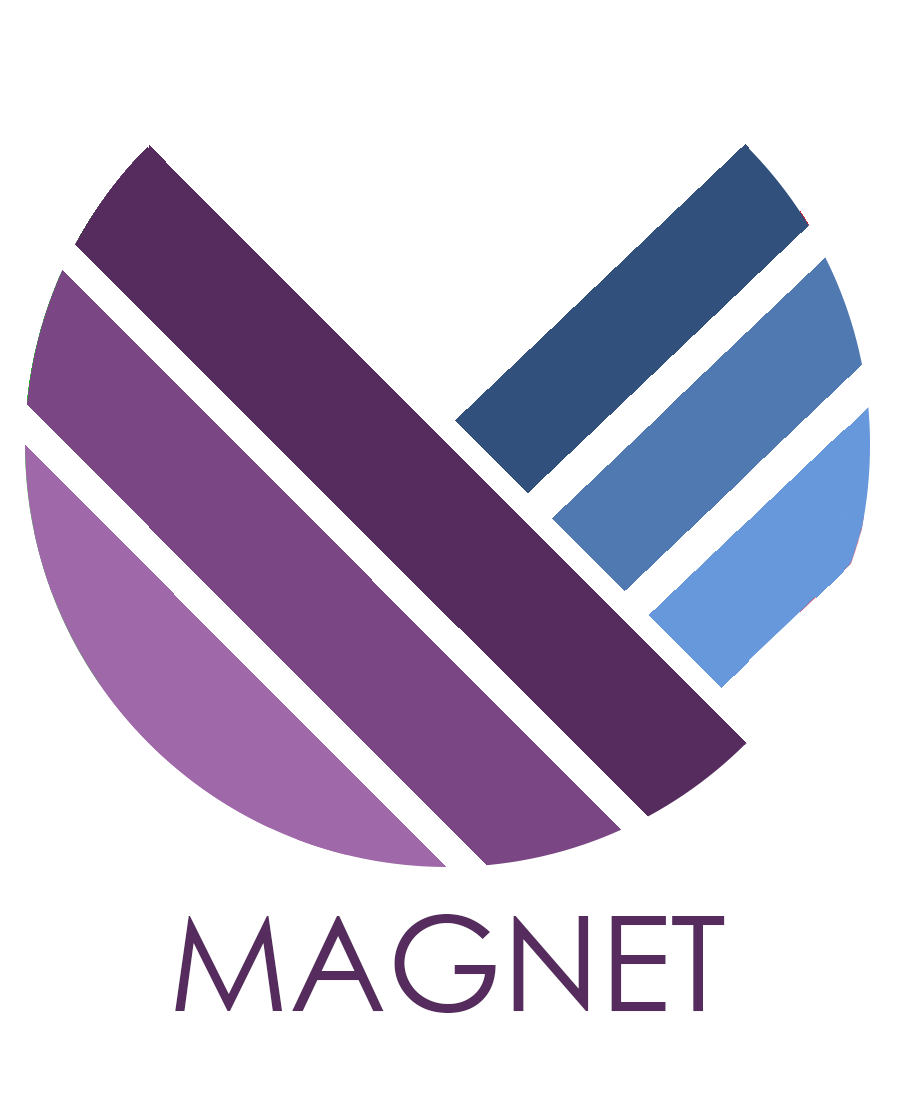
<style>
.page{position:relative;width:900px;height:1100px;background:#ffffff}
.page>*{position:absolute;margin:0}
.t1{font:132px "CenturyGothic";color:#562c5e}
</style>
<div class="page">
<p class="t1" style="left:175px;top:914px;width:550px;height:99px">MAGNET</p>
</div>
